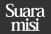
<style>
.page{position:relative;width:51px;height:34px;background:#333333}
.page>*{position:absolute;margin:0}
.t1{font:18px/14px "HeiseiMinStd-W7";letter-spacing:-0.08em;color:#ffffff}
</style>
<div class="page">
<p class="t1" style="left:5px;top:3px;width:41px;height:28px;text-align:center">Suara<br>misi</p>
</div>
